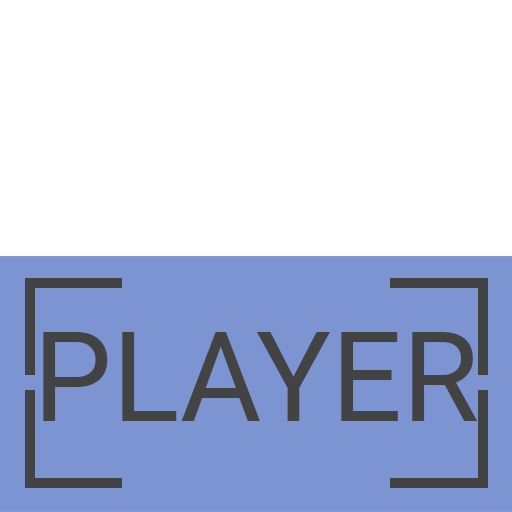
<style>
.page{position:relative;width:512px;height:512px;background:#ffffff}
.page>*{position:absolute;margin:0}
.t1{font:125px "Roboto-Regular";color:#434343}
</style>
<div class="page">
<p class="t1" style="left:43px;top:332px;width:434px;height:89px">PLAYER</p>
</div>
